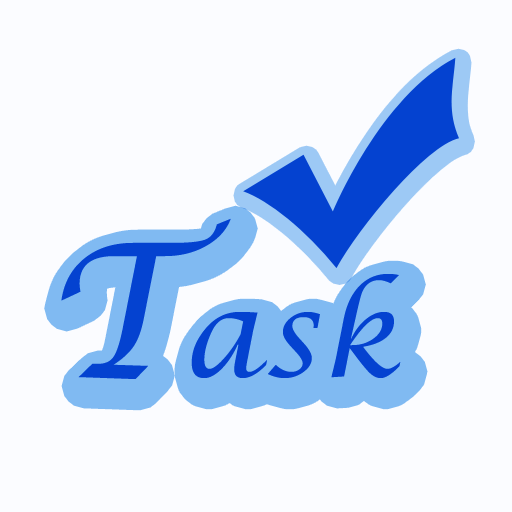
<style>
.page{position:relative;width:512px;height:512px;background:#fbfcff}
.page>*{position:absolute;margin:0}
.t1{font:119.6px "LucidaCalligraphy-Italic";letter-spacing:0.025em;color:#0442d0}
.t2{font:185.2px "LucidaCalligraphy-Italic";letter-spacing:0.025em;color:#0442d0}
</style>
<div class="page">
<p class="t1" style="left:61px;top:218px;width:340px;height:161px"><span class="t2">T</span>ask</p>
</div>
